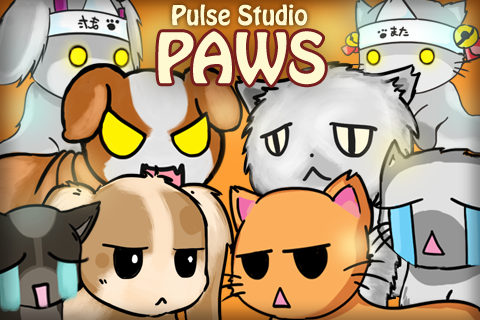
<style>
.page{position:relative;width:480px;height:320px}
.page>*{position:absolute;margin:0}
.t1{font:24px "HoboStd";color:#fff9d1}
.t2{font:61.1px "HoboStd";color:#fff9d1}
</style>
<div class="page">
<p class="t1" style="left:172px;top:4px;width:136px;height:22px">Pulse Studio</p>
<p class="t2" style="left:158px;top:31px;width:167px;height:54px">PAWS</p>
</div>
